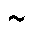
<style>
.page{position:relative;width:32px;height:50px;background:#ffffff}
.page>*{position:absolute;margin:0}
.t1{font:47.9px "Tuffy";color:#000000}
</style>
<div class="page">
<p class="t1" style="left:9px;top:15px;width:16px;height:7px">~</p>
</div>
